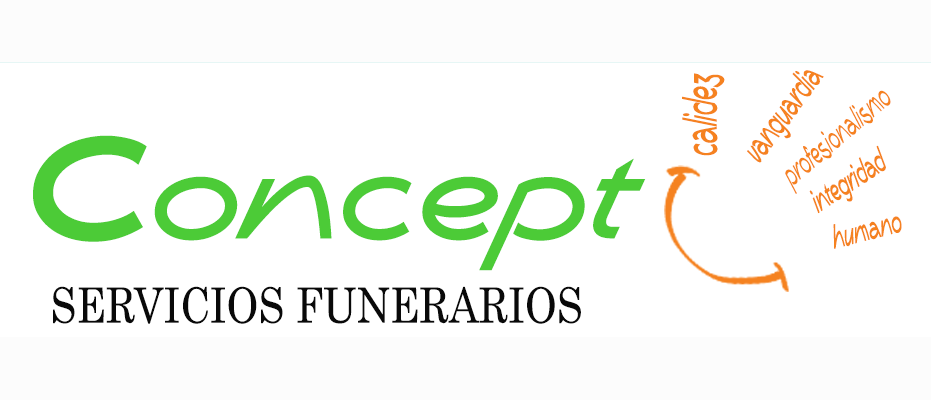
<style>
.page{position:relative;width:931px;height:400px;background:#ffffff}
.page>*{position:absolute;margin:0}
.t1{font:62.4px "DyaneW90";color:#f58220;scale:0.43 1}
.t2{font:48px "DyaneW90";color:#f58220;scale:0.43 1}
.t3{font:43.2px "DyaneW90";color:#f58220;scale:0.43 1}
.t4{font:165.4px "DyaneW90";color:#4ccb37;scale:0.97 1}
.t5{font:275.7px "DyaneW90";color:#4ccb37;scale:0.97 1}
.t6{font:43.1px "DyaneW90";color:#f58220;scale:0.43 1}
.t7{font:48.6px "Century";color:#090909;scale:0.84 1}
</style>
<div class="page">
<p class="t1" style="left:682px;top:73px;width:43px;height:83px;rotate:-90deg">calidez</p>
<p class="t2" style="left:747px;top:70px;width:77px;height:93px;rotate:-54deg">vanguardia</p>
<p class="t3" style="left:785px;top:90px;width:106px;height:104px;rotate:-40deg">profesionalismo</p>
<p class="t4" style="left:33px;top:135px;width:613px;height:136px"><span class="t5">c</span>oncept</p>
<p class="t6" style="left:809px;top:145px;width:77px;height:69px;rotate:-33deg">integridad</p>
<p class="t6" style="left:833px;top:216px;width:69px;height:33px;rotate:-14deg">humano</p>
<p class="t7" style="left:53px;top:286px;width:528px;height:38px">SERVICIOS FUNERARIOS</p>
</div>
